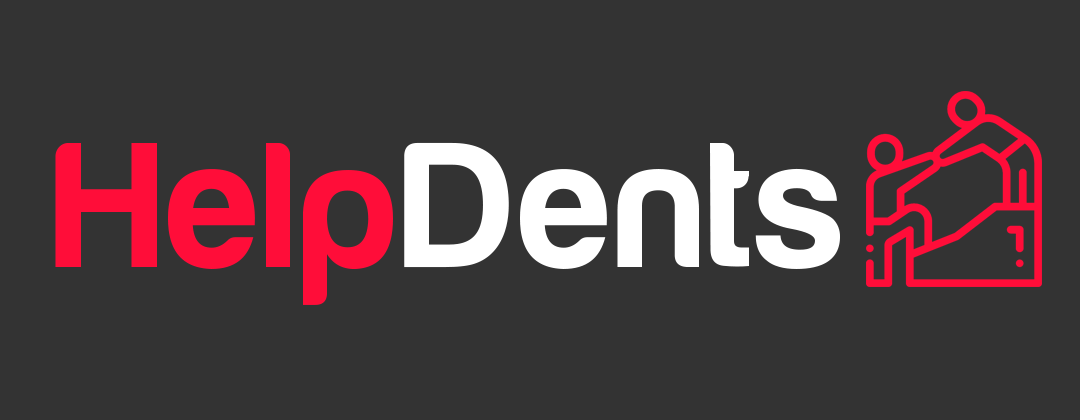
<style>
.page{position:relative;width:1080px;height:420px;background:#333333}
.page>*{position:absolute;margin:0}
.t1{font:182.2px "HarabaraMaisBold-HarabaraMaisBold";color:#ffffff}
.t2{font:182.2px "HarabaraMaisBold-HarabaraMaisBold";color:#ff0d39}
</style>
<div class="page">
<p class="t1" style="left:55px;top:142px;width:785px;height:163px"><span class="t2">Help</span>Dents</p>
</div>
